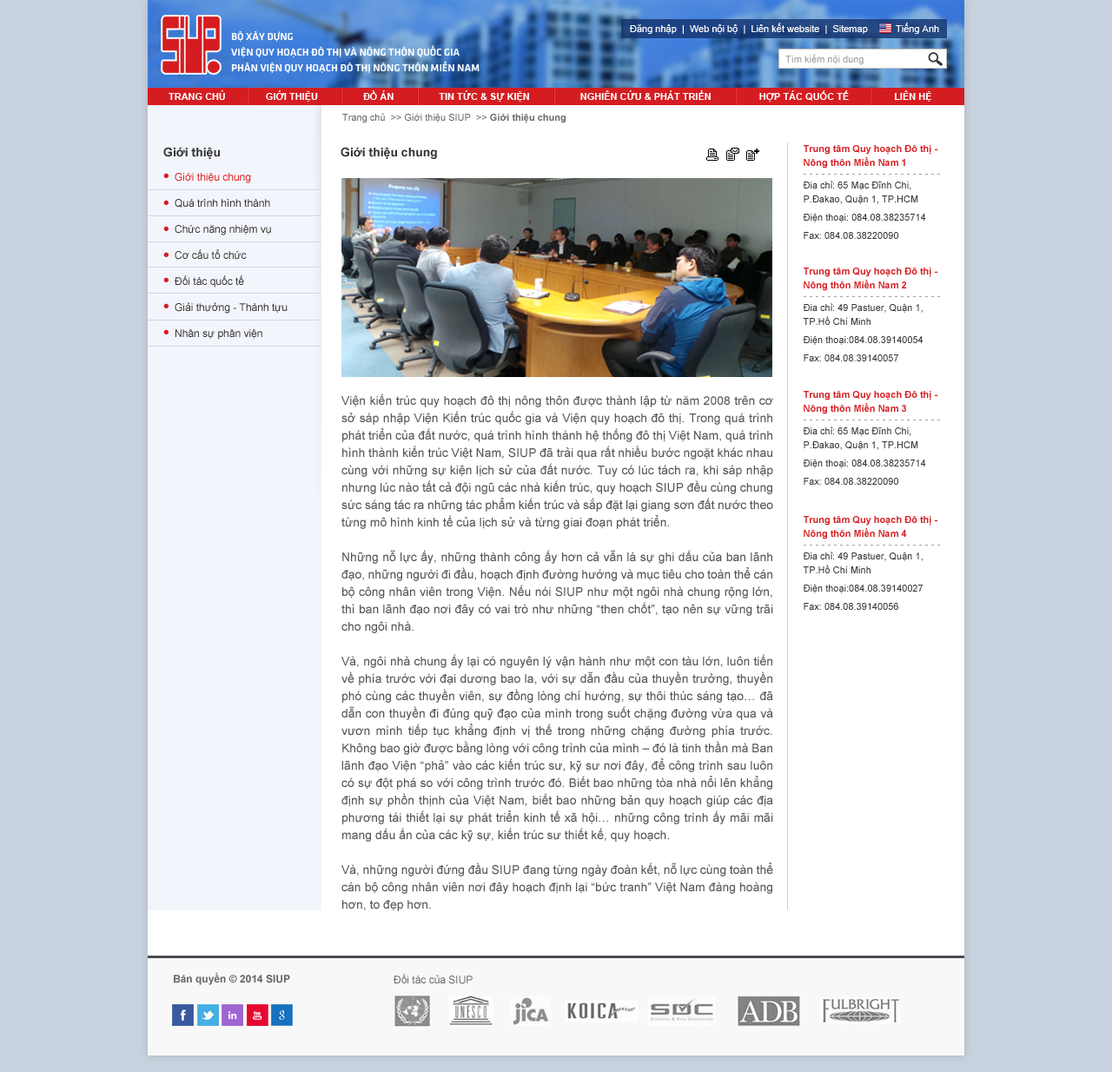
<style>
.page{position:relative;width:1112px;height:1072px;background:#ffffff}
.page>*{position:absolute;margin:0}
.t1{font:9.6px "ArialMT";color:#666666}
.t2{font:9.6px "Arial-BoldMT";color:#666666}
.t3{font:12.2px "Arial-BoldMT";color:#333333}
.t4{font:9.6px/13.9px "ArialMT";color:#333333}
.t5{font:9.6px/13.9px "Arial-BoldMT";color:#d51d21}
.t6{font:10.4px/26.1px "ArialMT";color:#333333}
.t7{font:10.4px/26.1px "ArialMT";color:#d51d21}
.t8{font:10.4px "ArialMT";color:#a1a1a1}
.t9{font:12.2px/17.4px "ArialMT";color:#555555}
.t10{font:10.4px "Arial-BoldMT";color:#666666}
.t11{font:10.4px "ArialMT";color:#666666}
</style>
<div class="page">
<p class="t1" style="left:342px;top:113px;width:224px;height:10px">Trang chủ  &gt;&gt; Giới thiệu SIUP  &gt;&gt; <span class="t2">Giới thiệu chung</span></p>
<p class="t3" style="left:163px;top:147px;width:57px;height:12px">Giới thiệu</p>
<p class="t3" style="left:341px;top:147px;width:96px;height:12px">Giới thiệu chung</p>
<p class="t4" style="left:803px;top:145px;width:135px;height:94px"><span class="t5">Trung tâm Quy hoạch Đô thị - Nông thôn Miền Nam 1<br></span>Đia chỉ: 65 Mạc Đĩnh Chi, P.Đakao, Quận 1, TP.HCM<br>Điện thoại: 084.08.38235714<br>Fax: 084.08.38220090</p>
<p class="t6" style="left:175px;top:173px;width:113px;height:167px"><span class="t7">Giới thiệu chung<br></span>Quá trình hình thành<br>Chức năng nhiệm vụ<br>Cơ cấu tổ chức<br>Đối tác quốc tế<br>Giải thưởng - Thành tựu<br>Nhân sự phân viện</p>
<p class="t8" style="left:804px;top:174px;width:136px;height:1px">- - - - - - - - - - - - - - - - - - - - - - -</p>
<p class="t4" style="left:803px;top:268px;width:135px;height:93px"><span class="t5">Trung tâm Quy hoạch Đô thị - Nông thôn Miền Nam 2<br></span>Đia chỉ: 49 Pastuer, Quận 1, TP.Hồ Chí Minh<br>Điện thoại:084.08.39140054<br>Fax: 084.08.39140057</p>
<p class="t8" style="left:804px;top:296px;width:136px;height:1px">- - - - - - - - - - - - - - - - - - - - - - -</p>
<p class="t9" style="left:341px;top:394px;width:432px;height:517px;text-align:justify">Viện kiến trúc quy hoạch đô thị nông thôn được thành lập từ năm 2008 trên cơ sở sáp nhập Viện Kiến trúc quốc gia và Viện quy hoạch đô thị. Trong quá trình phát triển của đất nước, quá trình hình thành hệ thống đô thị Việt Nam, quá trình hình thành kiến trúc Việt Nam, SIUP đã trải qua rất nhiều bước ngoặt khác nhau cùng với những sự kiện lịch sử của đất nước. Tuy có lúc tách ra, khi sáp nhập nhưng lúc nào tất cả đội ngũ các nhà kiến trúc, quy hoạch SIUP đều cùng chung sức sáng tác ra những tác phẩm kiến trúc và sắp đặt lại giang sơn đất nước theo từng mô hình kinh tế của lịch sử và từng giai đoạn phát triển.<br><br>Những nỗ lực ấy, những thành công ấy hơn cả vẫn là sự ghi dấu của ban lãnh đạo, những người đi đầu, hoạch định đường hướng và mục tiêu cho toàn thể cán bộ công nhân viên trong Viện. Nếu nói SIUP như một ngôi nhà chung rộng lớn, thì ban lãnh đạo nơi đây có vai trò như những “then chốt”, tạo nên sự vững trãi cho ngôi nhà.<br><br>Và, ngôi nhà chung ấy lại có nguyên lý vận hành như một con tàu lớn, luôn tiến về phía trước với đại dương bao la, với sự dẫn đầu của thuyền trưởng, thuyền phó cùng các thuyền viên, sự đồng lòng chí hướng, sự thôi thúc sáng tạo… đã dẫn con thuyền đi đúng quỹ đạo của mình trong suốt chặng đường vừa qua và vươn mình tiếp tục khẳng định vị thế trong những chặng đường phía trước. Không bao giờ được bằng lòng với công trình của mình – đó là tinh thần mà Ban lãnh đạo Viện “phả” vào các kiến trúc sư, kỹ sư nơi đây, để công trình sau luôn có sự đột phá so với công trình trước đó. Biết bao những tòa nhà nổi lên khẳng định sự phồn thịnh của Việt Nam, biết bao những bản quy hoạch giúp các địa phương tái thiết lại sự phát triển kinh tế xã hội… những công trình ấy mãi mãi mang dấu ấn của các kỹ sự, kiến trúc sư thiết kế, quy hoạch.<br><br>Và, những người đứng đầu SIUP đang từng ngày đoàn kết, nỗ lực cùng toàn thể cán bộ công nhân viên nơi đây hoạch định lại “bức tranh” Việt Nam đàng hoàng hơn, to đẹp hơn.</p>
<p class="t4" style="left:803px;top:391px;width:135px;height:94px"><span class="t5">Trung tâm Quy hoạch Đô thị - Nông thôn Miền Nam 3<br></span>Đia chỉ: 65 Mạc Đĩnh Chi, P.Đakao, Quận 1, TP.HCM<br>Điện thoại: 084.08.38235714<br>Fax: 084.08.38220090</p>
<p class="t8" style="left:804px;top:420px;width:136px;height:1px">- - - - - - - - - - - - - - - - - - - - - - -</p>
<p class="t4" style="left:803px;top:516px;width:135px;height:94px"><span class="t5">Trung tâm Quy hoạch Đô thị - Nông thôn Miền Nam 4<br></span>Đia chỉ: 49 Pastuer, Quận 1, TP.Hồ Chí Minh<br>Điện thoại:084.08.39140027<br>Fax: 084.08.39140056</p>
<p class="t8" style="left:804px;top:545px;width:136px;height:1px">- - - - - - - - - - - - - - - - - - - - - - -</p>
<p class="t10" style="left:174px;top:972px;width:116px;height:13px">Bản quyền © 2014 SIUP</p>
<p class="t11" style="left:394px;top:974px;width:79px;height:10px">Đối tác của SIUP</p>
</div>
